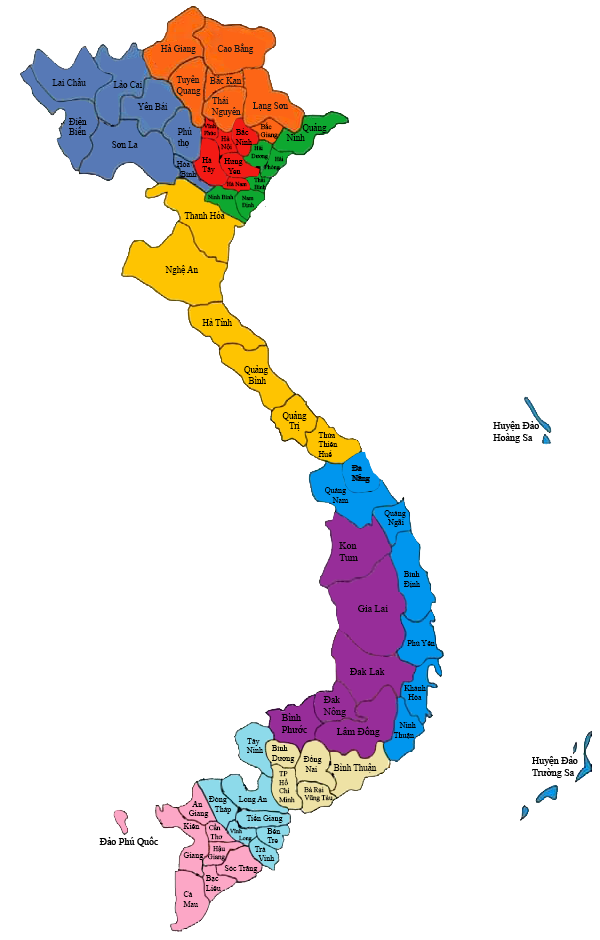
<style>
.page{position:relative;width:600px;height:940px;background:#ffffff}
.page>*{position:absolute;margin:0}
.t1{font:9px "TimesNewRomanPSMT";color:#151515}
.t2{font:9px "TimesNewRomanPSMT";color:#030303}
.t3{font:6px "TimesNewRomanPSMT";color:#000000}
.t4{font:7px "TimesNewRomanPSMT";color:#000000}
.t5{font:8px "TimesNewRomanPSMT";color:#000000}
.t6{font:8px "TimesNewRomanPSMT";color:#030303}
.t7{font:6px "TimesNewRomanPSMT";color:#030303}
.t8{font:6px "TimesNewRomanPSMT";color:#040404}
.t9{font:9px "TimesNewRomanPSMT";color:#010101}
.t10{font:9px "TimesNewRomanPSMT";color:#000000}
.t11{font:10px "TimesNewRomanPSMT";color:#000000}
.t12{font:8px "TimesNewRomanPSMT";color:#020202}
.t13{font:10px "TimesNewRomanPSMT";color:#050505}
.t14{font:10px "TimesNewRomanPSMT";color:#040404}
.t15{font:8px "TimesNewRomanPSMT";color:#040404}
.t16{font:7px "TimesNewRomanPSMT";color:#040404}
.t17{font:9px "TimesNewRomanPSMT";color:#040404}
</style>
<div class="page">
<p class="t1" style="left:161px;top:44px;width:35px;height:10px">Hà Giang</p>
<p class="t1" style="left:217px;top:43px;width:37px;height:11px">Cao Bằng</p>
<p class="t2" style="left:52px;top:78px;width:34px;height:8px">Lai Châu</p>
<p class="t1" style="left:176px;top:75px;width:25px;height:21px">Tuyên <br>Quang</p>
<p class="t1" style="left:210px;top:75px;width:32px;height:11px">Bắc Kạn</p>
<p class="t2" style="left:113px;top:80px;width:30px;height:8px">Lào Cai</p>
<p class="t2" style="left:137px;top:102px;width:31px;height:8px">Yên Bái</p>
<p class="t1" style="left:211px;top:96px;width:30px;height:21px">Thái <br>Nguyên</p>
<p class="t1" style="left:253px;top:102px;width:36px;height:9px">Lạng Sơn</p>
<p class="t2" style="left:69px;top:117px;width:18px;height:18px">Điện<br>Biên</p>
<p class="t3" style="left:204px;top:123px;width:12px;height:13px">Vĩnh<br>Phúc</p>
<p class="t4" style="left:260px;top:122px;width:18px;height:17px">Bắc<br>Giang</p>
<p class="t2" style="left:286px;top:123px;width:41px;height:18px">Quảng <br> Ninh</p>
<p class="t2" style="left:177px;top:127px;width:15px;height:21px">Phú<br>thọ</p>
<p class="t4" style="left:220px;top:135px;width:12px;height:16px">Hà <br>Nội</p>
<p class="t5" style="left:235px;top:128px;width:17px;height:17px">Bắc <br>Ninh</p>
<p class="t2" style="left:112px;top:141px;width:26px;height:7px">Sơn La</p>
<p class="t3" style="left:251px;top:145px;width:17px;height:15px">Hải<br>Dương</p>
<p class="t6" style="left:176px;top:161px;width:21px;height:16px">Hòa<br>  Bình</p>
<p class="t5" style="left:202px;top:157px;width:13px;height:17px">Hà <br>Tây</p>
<p class="t5" style="left:224px;top:158px;width:19px;height:16px">Hưng <br>  Yen</p>
<p class="t7" style="left:274px;top:156px;width:10px;height:6px">Hải</p>
<p class="t7" style="left:264px;top:164px;width:16px;height:7px">Phòng</p>
<p class="t3" style="left:226px;top:181px;width:21px;height:6px">Hà Nam</p>
<p class="t7" style="left:254px;top:177px;width:12px;height:13px">Thái <br>Bình</p>
<p class="t8" style="left:207px;top:194px;width:27px;height:6px">Ninh Bình</p>
<p class="t7" style="left:241px;top:195px;width:13px;height:13px">Nam<br>Định</p>
<p class="t9" style="left:184px;top:211px;width:41px;height:8px">Thanh Hóa</p>
<p class="t10" style="left:165px;top:265px;width:34px;height:10px">Nghệ An</p>
<p class="t10" style="left:202px;top:318px;width:30px;height:8px">Hà Tỉnh</p>
<p class="t10" style="left:244px;top:365px;width:24px;height:19px">Quảng <br>  Bình</p>
<p class="t10" style="left:282px;top:411px;width:25px;height:20px">Quảng <br>   Trị</p>
<p class="t11" style="left:493px;top:421px;width:46px;height:22px">Huyện Đảo<br>Hoàng Sa</p>
<p class="t5" style="left:318px;top:432px;width:20px;height:25px">Thừa <br>Thiên <br>Huế</p>
<p class="t12" style="left:351px;top:465px;width:18px;height:18px">Đà<br>Nẳng</p>
<p class="t12" style="left:325px;top:487px;width:24px;height:16px">Quảng<br>    Nam</p>
<p class="t12" style="left:384px;top:510px;width:22px;height:17px">Quảng<br>  Ngãi</p>
<p class="t13" style="left:339px;top:542px;width:19px;height:19px">Kon<br>Tum</p>
<p class="t12" style="left:404px;top:571px;width:16px;height:17px">Bình<br>Định</p>
<p class="t13" style="left:358px;top:605px;width:30px;height:7px">Gia Lai</p>
<p class="t12" style="left:407px;top:640px;width:28px;height:6px">Phú Yên</p>
<p class="t11" style="left:350px;top:668px;width:35px;height:7px">Đak Lak</p>
<p class="t12" style="left:404px;top:685px;width:22px;height:15px">Khánh <br>  Hòa</p>
<p class="t14" style="left:323px;top:696px;width:23px;height:21px">Đak<br>Nông</p>
<p class="t11" style="left:281px;top:713px;width:27px;height:20px">Bình <br>Phước</p>
<p class="t11" style="left:336px;top:726px;width:44px;height:11px">Lâm Đồng</p>
<p class="t12" style="left:393px;top:722px;width:23px;height:17px">Ninh<br>Thuận</p>
<p class="t15" style="left:246px;top:738px;width:17px;height:15px">Tây <br>Ninh</p>
<p class="t15" style="left:272px;top:745px;width:23px;height:18px">Bình<br>Dương</p>
<p class="t15" style="left:303px;top:755px;width:19px;height:17px">Đồng<br> Nai</p>
<p class="t11" style="left:532px;top:756px;width:46px;height:22px">Huyện Đảo<br>Trường Sa</p>
<p class="t16" style="left:279px;top:771px;width:16px;height:32px">TP<br>Hồ<br>Chí<br>Minh</p>
<p class="t17" style="left:333px;top:763px;width:44px;height:10px">Bình Thuận</p>
<p class="t15" style="left:209px;top:796px;width:23px;height:18px">Đòng<br>   Tháp</p>
<p class="t15" style="left:238px;top:796px;width:30px;height:8px">Long An</p>
<p class="t16" style="left:304px;top:786px;width:29px;height:16px">Bà Rại<br>Vũng Tàu</p>
<p class="t5" style="left:189px;top:801px;width:20px;height:17px">An<br>Giang</p>
<p class="t15" style="left:246px;top:814px;width:37px;height:9px">Tiền Giang</p>
<p class="t5" style="left:183px;top:823px;width:21px;height:37px">Kiên<br><br><br>Giang</p>
<p class="t4" style="left:209px;top:823px;width:14px;height:17px">Cần <br> Thơ</p>
<p class="t8" style="left:230px;top:828px;width:22px;height:14px">Vĩnh <br>      Long</p>
<p class="t15" style="left:267px;top:827px;width:14px;height:16px">Bến<br>Tre</p>
<p class="t11" style="left:99px;top:836px;width:60px;height:11px">Đảo Phú Quốc</p>
<p class="t4" style="left:208px;top:845px;width:18px;height:16px">Hậu<br>Giang</p>
<p class="t15" style="left:254px;top:846px;width:21px;height:15px">Trà<br>  Vinh</p>
<p class="t5" style="left:224px;top:865px;width:34px;height:8px">Sóc Trăng</p>
<p class="t5" style="left:206px;top:875px;width:15px;height:16px">Bạc<br>Liêu</p>
<p class="t5" style="left:183px;top:891px;width:16px;height:16px">Cà<br>Mau</p>
</div>
